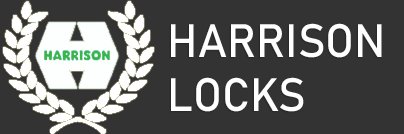
<style>
.page{position:relative;width:404px;height:134px;background:#333333}
.page>*{position:absolute;margin:0}
.t1{font:46.4px "Bahnschrift";color:#ffffff}
</style>
<div class="page">
<p class="t1" style="left:171px;top:23px;width:211px;height:89px">HARRISON <br>LOCKS</p>
</div>
